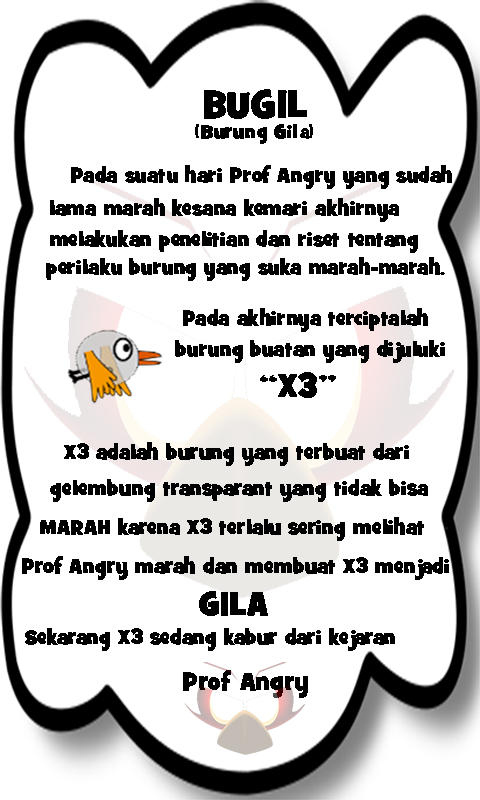
<style>
.page{position:relative;width:480px;height:800px;background:#ffffff}
.page>*{position:absolute;margin:0}
.t1{font:38.3px "GrilledCheeseBTNToasted";color:#000000}
.t2{font:19.3px "GrilledCheeseBTNToasted";color:#000000}
.t3{font:20.7px "GrilledCheeseBTNToasted";color:#000000}
.t4{font:33.1px "GrilledCheeseBTNToasted";color:#000000}
.t5{font:24.9px "GrilledCheeseBTNToasted";color:#000000}
</style>
<div class="page">
<p class="t1" style="left:204px;top:89px;width:103px;height:30px">BUGIL</p>
<p class="t2" style="left:195px;top:124px;width:118px;height:20px">(Burung Gila)</p>
<p class="t3" style="left:71px;top:165px;width:381px;height:24px">Pada suatu hari Prof Angry yang sudah</p>
<p class="t3" style="left:50px;top:198px;width:349px;height:24px">lama marah kesana kemari akhirnya</p>
<p class="t3" style="left:50px;top:230px;width:368px;height:23px">melakukan penelitian dan riset tentang</p>
<p class="t3" style="left:46px;top:257px;width:399px;height:24px">perilaku burung yang suka marah-marah.</p>
<p class="t3" style="left:183px;top:308px;width:245px;height:24px">Pada akhirnya terciptalah</p>
<p class="t3" style="left:175px;top:340px;width:270px;height:23px">burung buatan yang dijuluki</p>
<p class="t4" style="left:260px;top:372px;width:76px;height:26px">“X3”</p>
<p class="t3" style="left:64px;top:442px;width:345px;height:24px">X3 adalah burung yang terbuat dari</p>
<p class="t3" style="left:50px;top:479px;width:378px;height:23px">gelembung transparant yang tidak bisa</p>
<p class="t3" style="left:40px;top:517px;width:384px;height:24px">MARAH karena X3 terlalu sering melihat</p>
<p class="t3" style="left:22px;top:556px;width:427px;height:24px">Prof Angry marah dan membuat X3 menjadi</p>
<p class="t4" style="left:199px;top:591px;width:69px;height:25px">GILA</p>
<p class="t3" style="left:25px;top:628px;width:370px;height:23px">Sekarang X3 sedang kabur dari kejaran</p>
<p class="t5" style="left:183px;top:670px;width:125px;height:28px">Prof Angry</p>
</div>
